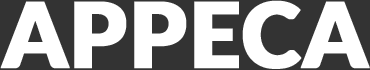
<style>
.page{position:relative;width:370px;height:70px;background:#ffffff}
.page>*{position:absolute;margin:0}
.t1{font:90px "Lato-Black";color:#ffffff;font-weight:bold}
</style>
<div class="page">
<p class="t1" style="left:0px;top:0px;width:370px;height:69px">APPECA</p>
</div>
